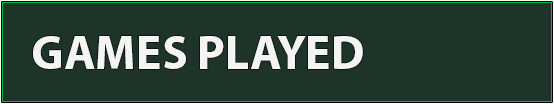
<style>
.page{position:relative;width:554px;height:104px;background:#1f3428}
.page>*{position:absolute;margin:0}
.t1{font:48px "MyriadHebrew-Bold";color:#f4f4f4}
</style>
<div class="page">
<p class="t1" style="left:33px;top:36px;width:330px;height:33px">GAMES PLAYED</p>
</div>
